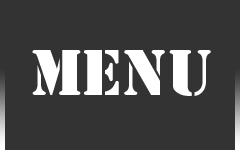
<style>
.page{position:relative;width:240px;height:150px;background:#333333}
.page>*{position:absolute;margin:0}
.t1{font:60px "StencilStd";color:#ffffff}
</style>
<div class="page">
<p class="t1" style="left:32px;top:50px;width:179px;height:46px">Menu</p>
</div>
